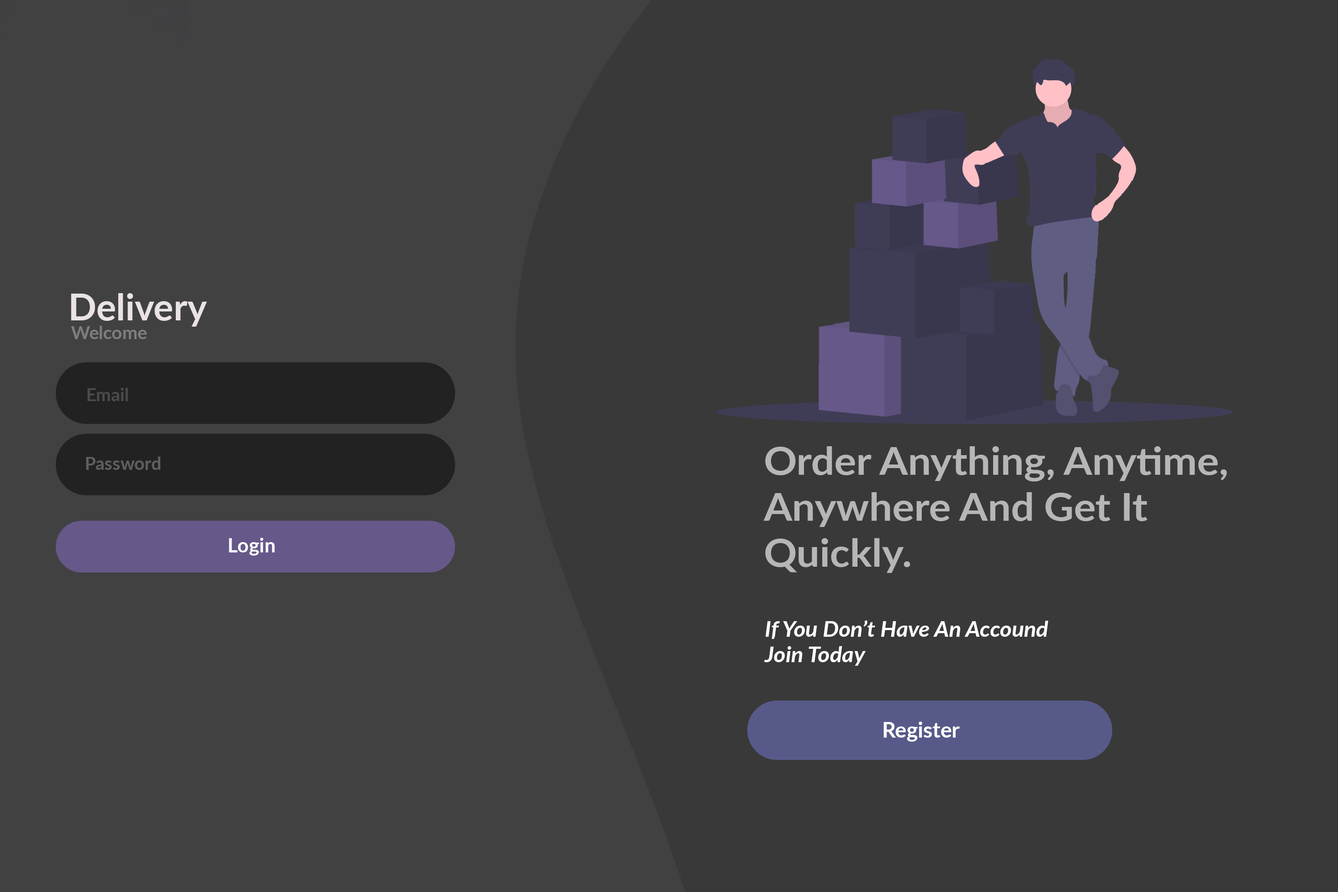
<style>
.page{position:relative;width:1338px;height:892px;background:#393939}
.page>*{position:absolute;margin:0}
.t1{font:37.1px "Lato-Bold";color:#eae3e3}
.t2{font:38.2px "Lato-Bold";color:#b6b6b6;scale:1.07 1}
.t3{font:17.8px "Lato-Bold";color:#615e5e}
.t4{font:19.8px "Lato-Bold";color:#ffffff}
.t5{font:21.1px "Lato-BoldItalic";color:#ffffff;scale:1.07 1}
</style>
<div class="page">
<p class="t1" style="left:71px;top:293px;width:136px;height:33px">Delivery</p>
<p class="t2" style="left:763px;top:446px;width:463px;height:127px">Order Anything, Anytime,<br>Anywhere And Get It<br>Quickly.</p>
<p class="t3" style="left:86px;top:456px;width:75px;height:14px">Password</p>
<p class="t4" style="left:229px;top:537px;width:46px;height:18px">Login</p>
<p class="t5" style="left:764px;top:620px;width:284px;height:45px">If You Don’t Have An Accound<br>Join Today</p>
</div>
